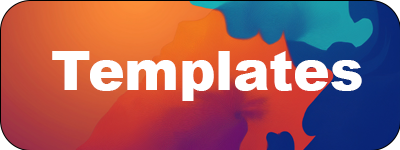
<style>
.page{position:relative;width:400px;height:150px}
.page>*{position:absolute;margin:0}
.t1{font:54.7px "Arial-Black";color:#ffffff}
</style>
<div class="page">
<p class="t1" style="left:52px;top:51px;width:310px;height:50px">Templates</p>
</div>
